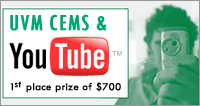
<style>
.page{position:relative;width:200px;height:106px;background:#ffffff}
.page>*{position:absolute;margin:0}
.t1{font:24px "TwCenMT-Condensed";letter-spacing:0.02em;color:#00a770;font-weight:bold}
.t2{font:11px "TwCenMT-Regular";color:#000000;font-weight:bold}
.t3{font:10.2px "TwCenMT-Regular";color:#000000;font-weight:bold}
</style>
<div class="page">
<p class="t1" style="left:10px;top:14px;width:97px;height:17px">UVM CEMS &amp;</p>
<p class="t2" style="left:10px;top:82px;width:111px;height:11px">1   place prize of $700</p>
<p class="t3" style="left:14px;top:81px;width:7px;height:7px">st</p>
</div>
